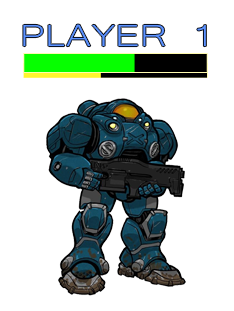
<style>
.page{position:relative;width:234px;height:311px;background:#ffffff}
.page>*{position:absolute;margin:0}
.t1{font:39.5px "Microsoft-Yi-Baiti";color:#5c92ff;scale:1.24 1}
</style>
<div class="page">
<p class="t1" style="left:23px;top:24px;width:183px;height:23px">PLAYER 1</p>
</div>
